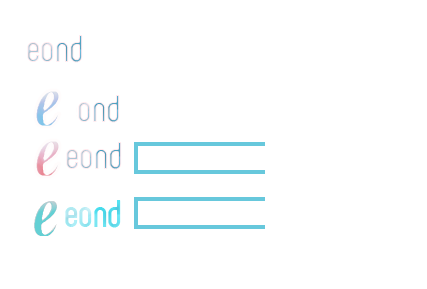
<style>
.page{position:relative;width:427px;height:289px;background:#ffffff}
.page>*{position:absolute;margin:0}
.t1{font:36px "071MKSD-01Medium"}
</style>
<div class="page">
<p class="t1" style="left:65px;top:200px;width:56px;height:28px">eond</p>
</div>
